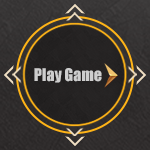
<style>
.page{position:relative;width:150px;height:150px}
.page>*{position:absolute;margin:0}
.t1{font:16px "Impact";color:#cecece}
</style>
<div class="page">
<p class="t1" style="left:34px;top:68px;width:68px;height:15px">Play Game</p>
</div>
